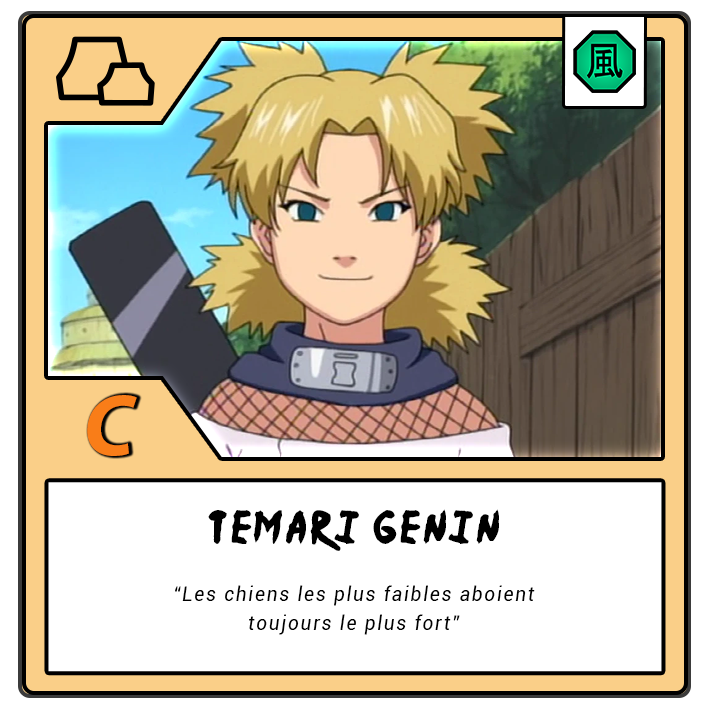
<style>
.page{position:relative;width:709px;height:709px;background:#ffffff}
.page>*{position:absolute;margin:0}
.t1{font:87.5px "MyriadPro-BoldIt";letter-spacing:-0.12em;color:#f97d18}
.t2{font:37.5px "Ninja-Naruto";letter-spacing:0.1em;color:#000000}
.t3{font:20.8px/29.2px "Roboto-Italic";letter-spacing:0.1em;color:#000000;scale:0.9 1}
</style>
<div class="page">
<p class="t1" style="left:87px;top:395px;width:50px;height:61px">C</p>
<p class="t2" style="left:208px;top:509px;width:291px;height:42px">Temari GENIN</p>
<p class="t3" style="left:175px;top:585px;width:360px;height:50px;text-align:center">“Les chiens les plus faibles aboient<br>toujours le plus fort”</p>
</div>
